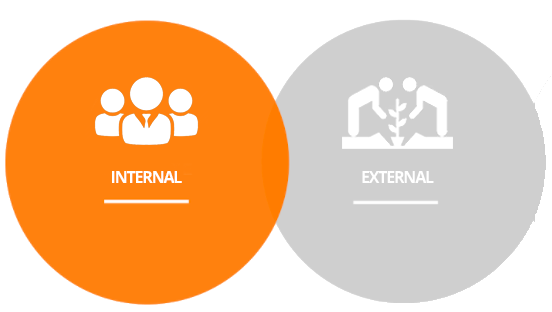
<style>
.page{position:relative;width:552px;height:312px;background:#ffffff}
.page>*{position:absolute;margin:0}
.t1{font:16.8px "OpenSans-Bold";letter-spacing:-0.075em;color:#ffffff;scale:0.95 1}
</style>
<div class="page">
<p class="t1" style="left:112px;top:171px;width:70px;height:12px">INTERNAL</p>
<p class="t1" style="left:362px;top:171px;width:72px;height:12px">EXTERNAL</p>
</div>
